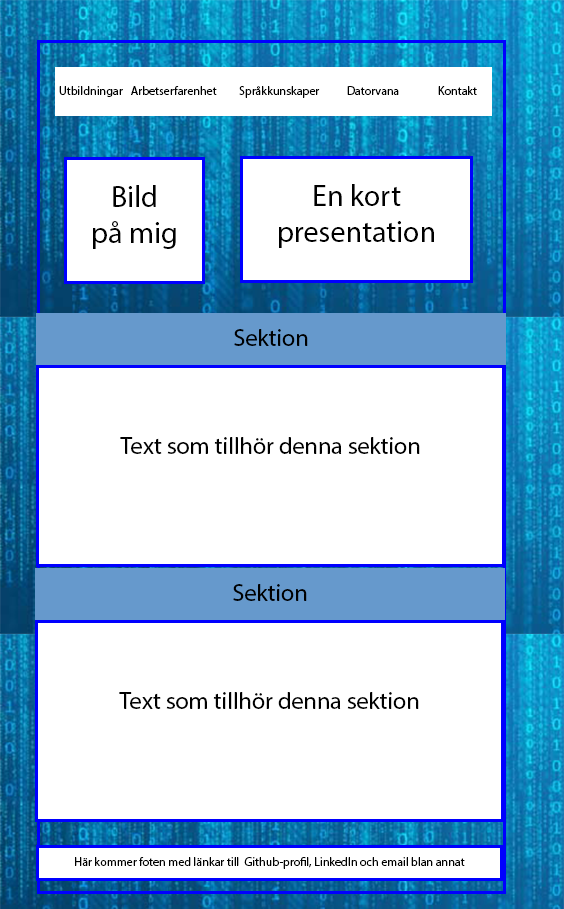
<style>
.page{position:relative;width:564px;height:909px;background:#ffffff}
.page>*{position:absolute;margin:0}
.t1{font:12px "MyriadPro-Regular";color:#000000}
.t2{font:30px "MyriadPro-Regular";color:#000000}
.t3{font:24px "MyriadPro-Regular";color:#000000}
</style>
<div class="page">
<p class="t1" style="left:59px;top:86px;width:418px;height:12px">Utbildningar Arbetserfarenhet Språkkunskaper Datorvana Kontakt</p>
<p class="t2" style="left:93px;top:185px;width:83px;height:64px;text-align:center">Bild <br>på mig</p>
<p class="t2" style="left:279px;top:184px;width:155px;height:64px;text-align:center">En kort presentation</p>
<p class="t3" style="left:234px;top:329px;width:74px;height:17px">Sektion</p>
<p class="t3" style="left:120px;top:437px;width:300px;height:17px">Text som tillhör denna sektion</p>
<p class="t3" style="left:233px;top:584px;width:74px;height:17px">Sektion</p>
<p class="t3" style="left:119px;top:692px;width:300px;height:17px">Text som tillhör denna sektion</p>
<p class="t1" style="left:75px;top:857px;width:390px;height:12px">Här kommer foten med länkar till  Github-profil, LinkedIn och email blan annat</p>
</div>
